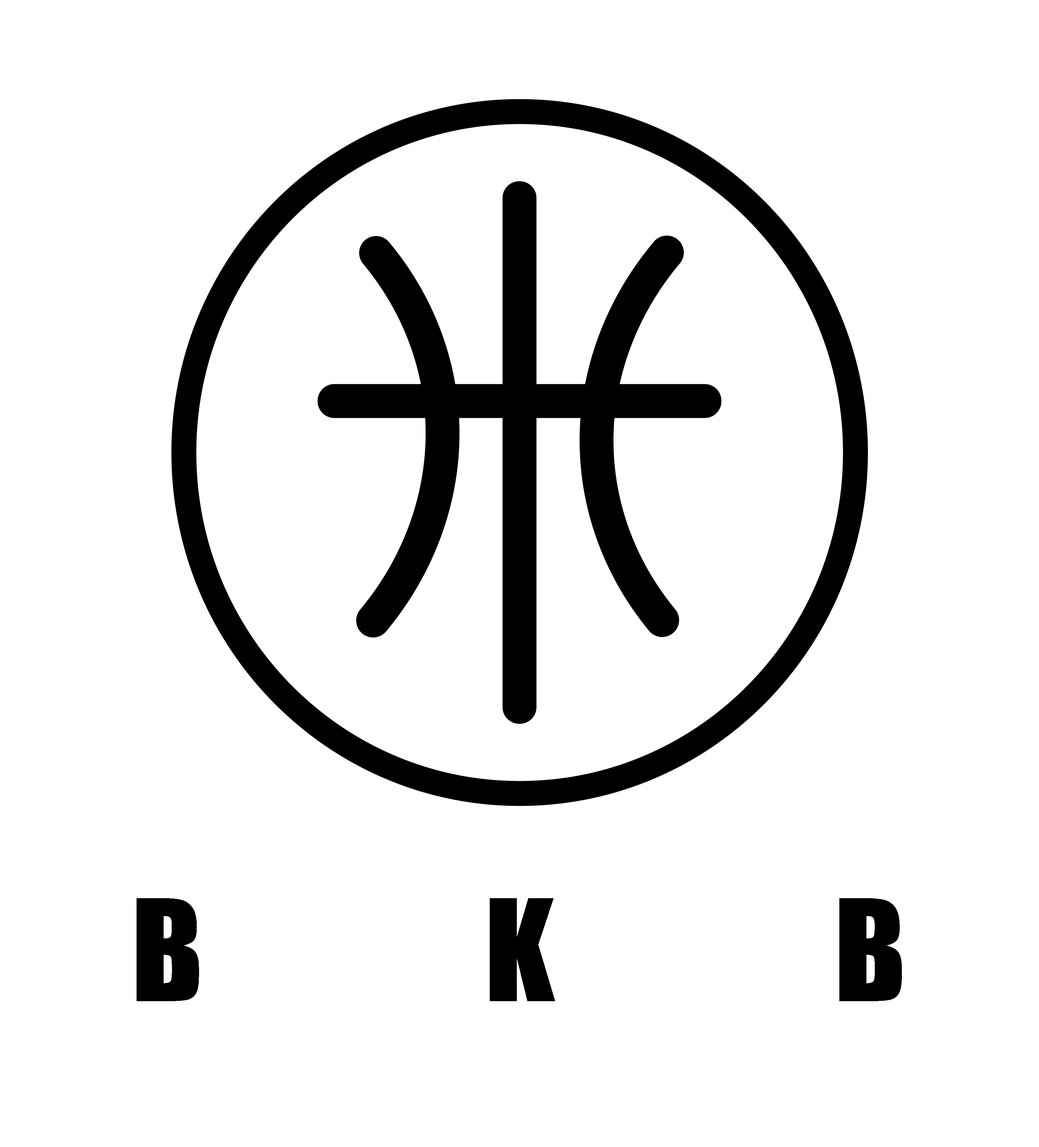
<style>
.page{position:relative;width:1039px;height:1147px;background:#ffffff}
.page>*{position:absolute;margin:0}
.t1{font:129.8px "Impact";color:#000000}
</style>
<div class="page">
<p class="t1" style="left:137px;top:898px;width:765px;height:103px">B             K             B</p>
</div>
